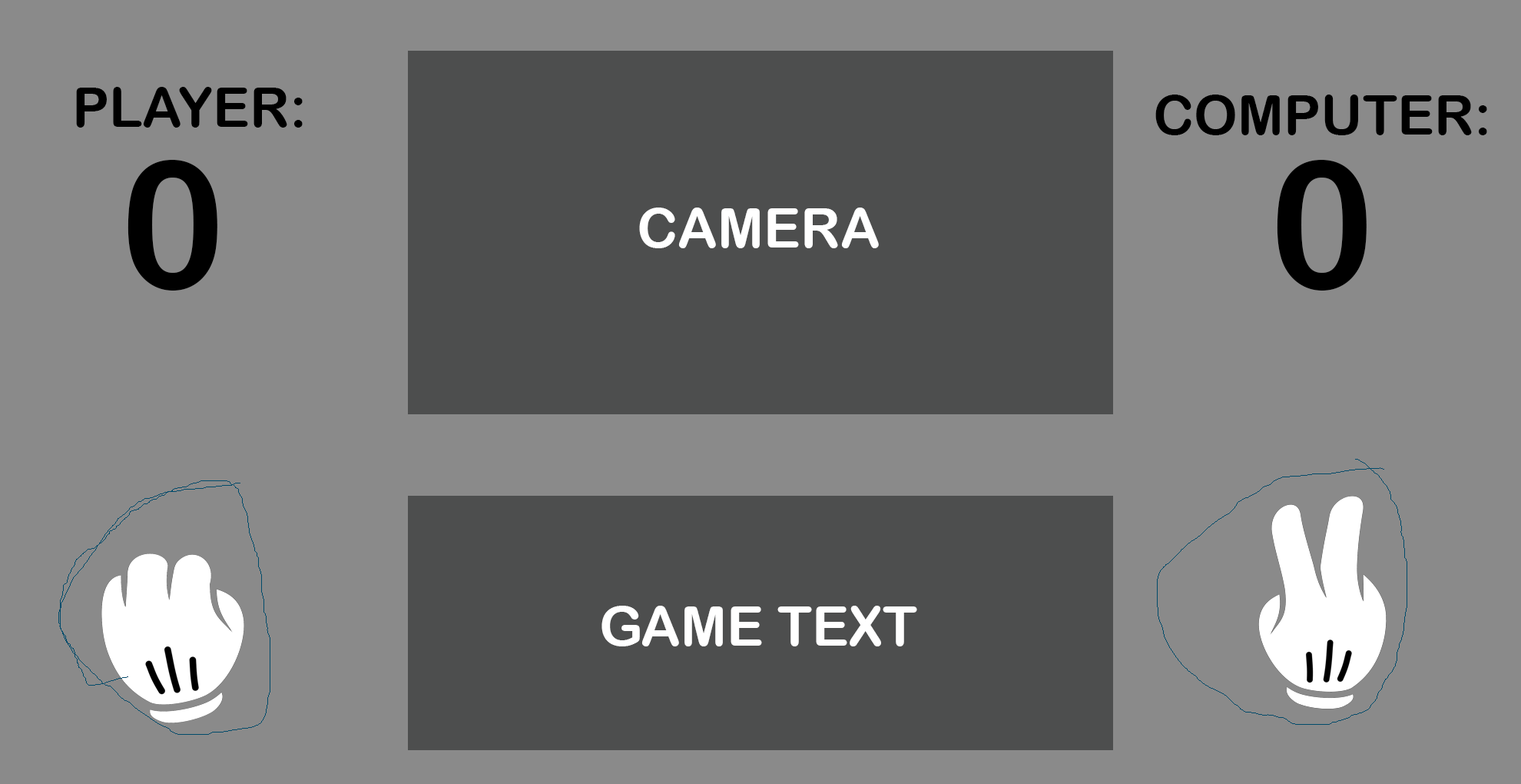
<style>
.page{position:relative;width:1521px;height:784px;background:#8a8a8a}
.page>*{position:absolute;margin:0}
.t1{font:55.3px "ArialRoundedMTBold";color:#000000;text-transform:uppercase}
.t2{font:178.4px "ArialRoundedMTBold";color:#000000;text-transform:uppercase}
.t3{font:55.3px "ArialRoundedMTBold";color:#ffffff;text-transform:uppercase}
</style>
<div class="page">
<p class="t1" style="left:76px;top:87px;width:227px;height:41px">Player:</p>
<p class="t1" style="left:1156px;top:95px;width:332px;height:40px">Computer:</p>
<p class="t2" style="left:128px;top:160px;width:89px;height:130px">0</p>
<p class="t2" style="left:1277px;top:160px;width:90px;height:130px">0</p>
<p class="t3" style="left:639px;top:207px;width:240px;height:41px">Camera</p>
<p class="t3" style="left:602px;top:605px;width:315px;height:41px">Game Text</p>
</div>
